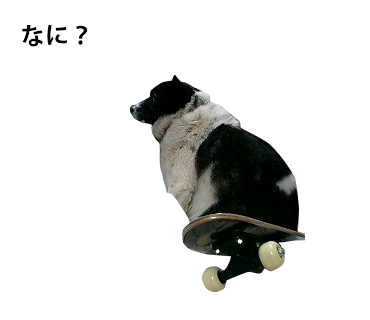
<style>
.page{position:relative;width:370px;height:320px;background:#ffffff}
.page>*{position:absolute;margin:0}
.t1{font:24px "KozGoPr6N-Bold";color:#000000}
</style>
<div class="page">
<p class="t1" style="left:22px;top:25px;width:66px;height:22px">なに？</p>
</div>
